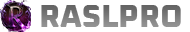
<style>
.page{position:relative;width:190px;height:32px;background:#ffffff}
.page>*{position:absolute;margin:0}
.t1{font:32px "OxaniumRoman-ExtraBold";color:#7c7c7c}
</style>
<div class="page">
<p class="t1" style="left:41px;top:5px;width:140px;height:22px">RASLPRO</p>
</div>
